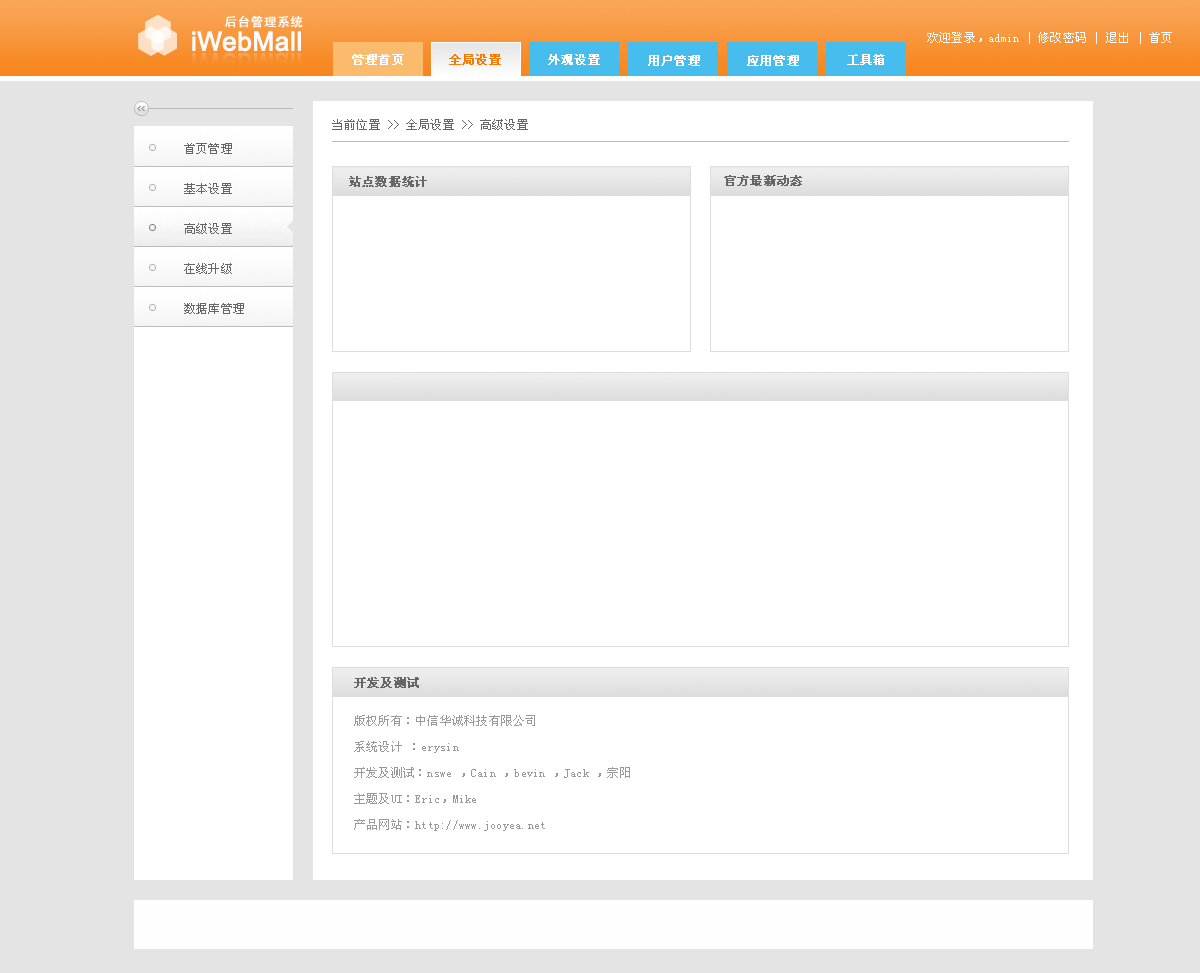
<style>
.page{position:relative;width:1200px;height:973px;background:#ffffff}
.page>*{position:absolute;margin:0}
.t1{font:26px "ArialMT";color:#fafafa;font-weight:bold}
.t2{font:12px "NSimSun";letter-spacing:0.02em;color:#ffffff}
.t3{font:12px "NSimSun";letter-spacing:0.02em;color:#ffffff;font-weight:bold}
.t4{font:12px "NSimSun";letter-spacing:0.02em;color:#f67a06;font-weight:bold}
.t5{font:12px "NSimSun";letter-spacing:0.02em;color:#666666}
.t6{font:12px/40px "NSimSun";letter-spacing:0.02em;color:#666666}
.t7{font:12px "NSimSun";letter-spacing:0.02em;color:#666666;font-weight:bold}
.t8{font:12px/26px "NSimSun";letter-spacing:0.02em;color:#999999}
</style>
<div class="page">
<p class="t1" style="left:192px;top:31px;width:109px;height:21px">iWebMall</p>
<p class="t2" style="left:927px;top:32px;width:245px;height:12px">欢迎登录，admin | 修改密码 | 退出 | 首页</p>
<p class="t3" style="left:352px;top:54px;width:52px;height:11px">管理首页</p>
<p class="t4" style="left:449px;top:54px;width:52px;height:11px">全局设置</p>
<p class="t3" style="left:548px;top:54px;width:52px;height:11px">外观设置</p>
<p class="t3" style="left:847px;top:54px;width:38px;height:11px">工具箱</p>
<p class="t3" style="left:648px;top:55px;width:52px;height:11px">用户管理</p>
<p class="t3" style="left:747px;top:55px;width:52px;height:11px">应用管理</p>
<p class="t5" style="left:332px;top:119px;width:196px;height:11px">当前位置 &gt;&gt; 全局设置 &gt;&gt; 高级设置</p>
<p class="t6" style="left:184px;top:143px;width:60px;height:171px">首页管理<br>基本设置<br>高级设置<br>在线升级<br>数据库管理</p>
<p class="t7" style="left:349px;top:176px;width:78px;height:11px">站点数据统计</p>
<p class="t7" style="left:724px;top:175px;width:78px;height:11px">官方最新动态</p>
<p class="t7" style="left:354px;top:677px;width:65px;height:11px">开发及测试</p>
<p class="t8" style="left:354px;top:715px;width:276px;height:116px">版权所有：中信华诚科技有限公司  <br>系统设计 ：erysin  <br>开发及测试：nswe ，Cain ，bevin ，Jack ，宗阳 <br>主题及UI：Eric，Mike  <br>产品网站：http://www.jooyea.net</p>
</div>
